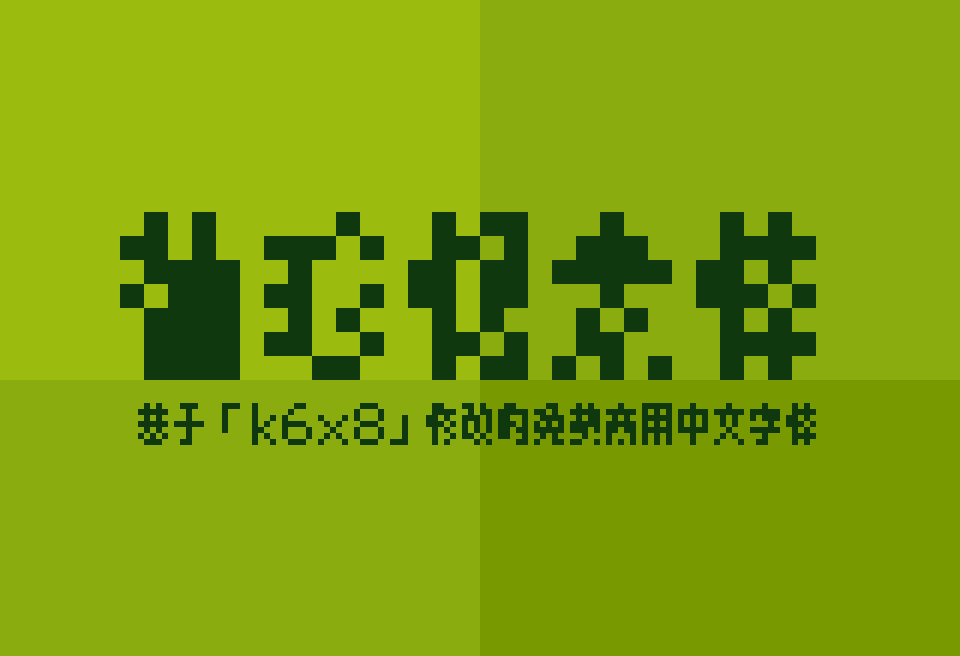
<style>
.page{position:relative;width:960px;height:656px;background:#8bac0f}
.page>*{position:absolute;margin:0}
.t1{font:192px "XiuZhenXiangSuTi";color:#0f380f}
.t2{font:48px "XiuZhenXiangSuTi";color:#0f380f}
</style>
<div class="page">
<p class="t1" style="left:120px;top:212px;width:696px;height:168px">袖珍像素体</p>
<p class="t2" style="left:138px;top:403px;width:678px;height:42px">基于「ｋ６ｘ８」修改的免费商用中文字体</p>
</div>
